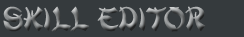
<style>
.page{position:relative;width:244px;height:37px;background:#353a3d}
.page>*{position:absolute;margin:0}
.t1{font:36px "MandarinD"}
</style>
<div class="page">
<p class="t1" style="left:3px;top:6px;width:203px;height:26px">Skill Editor</p>
</div>
